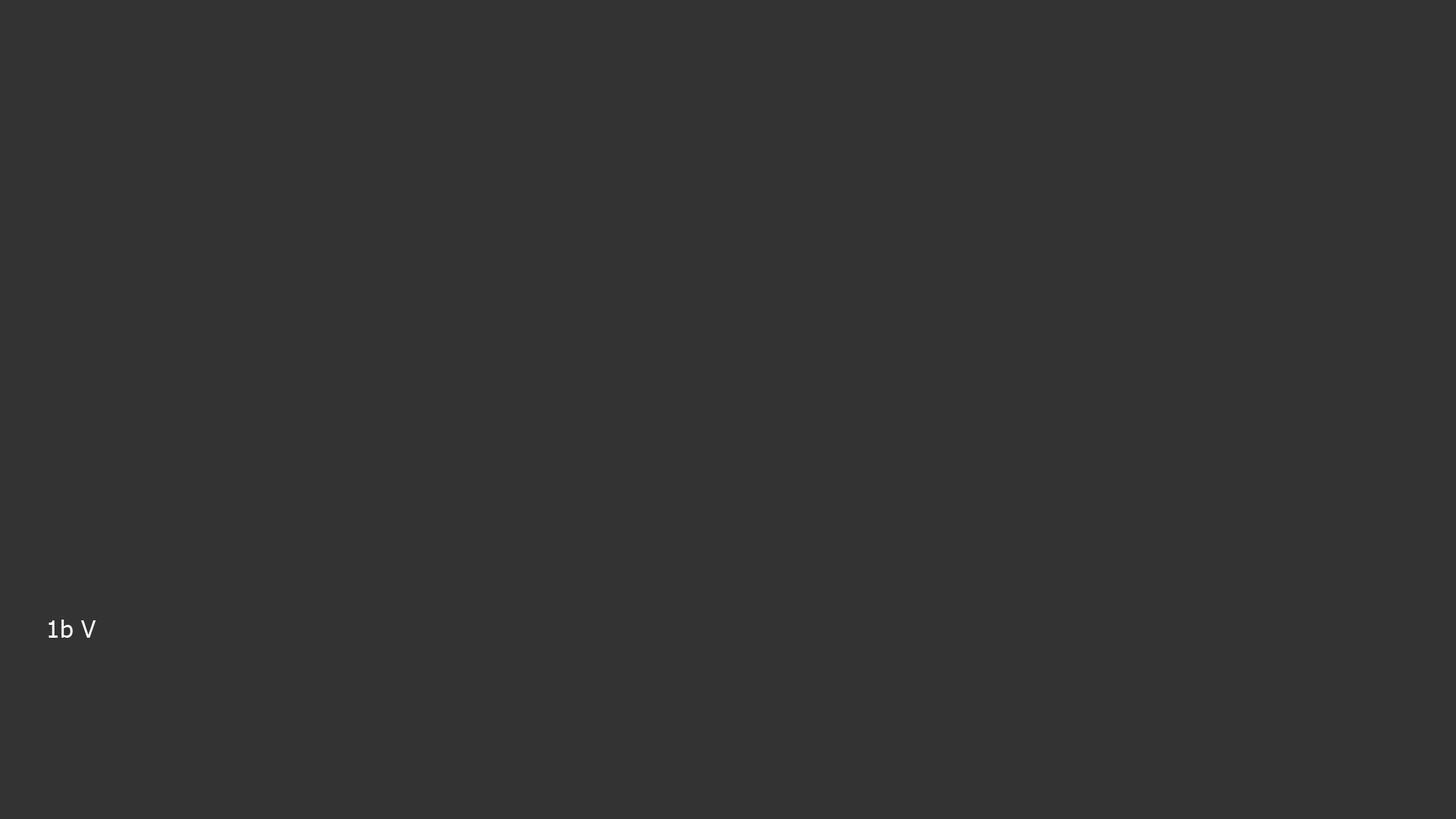
<style>
.page{position:relative;width:1456px;height:819px;background:#333333}
.page>*{position:absolute;margin:0}
.t1{font:24.3px "Tahoma";color:#ffffff}
</style>
<div class="page">
<p class="t1" style="left:49px;top:620px;width:47px;height:18px">1b V</p>
</div>
